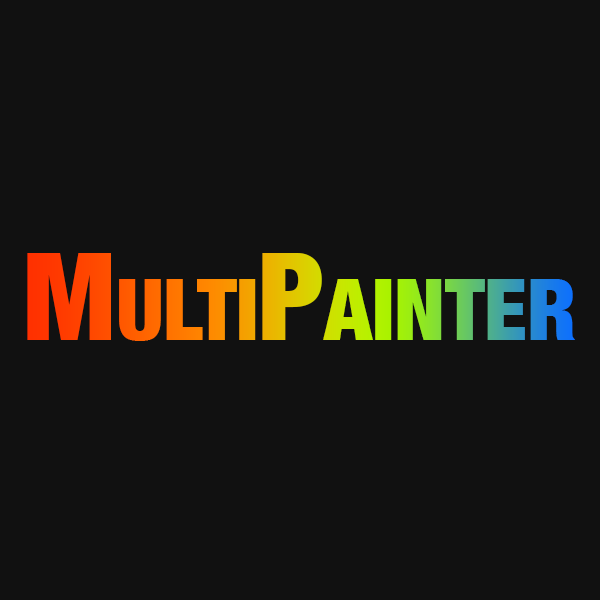
<style>
.page{position:relative;width:600px;height:600px;background:#111111}
.page>*{position:absolute;margin:0}
.t1{font:121.9px "HelveticaNeue-CondensedBlack";font-variant:small-caps}
</style>
<div class="page">
<p class="t1" style="left:27px;top:253px;width:548px;height:88px">MultiPainter</p>
</div>
